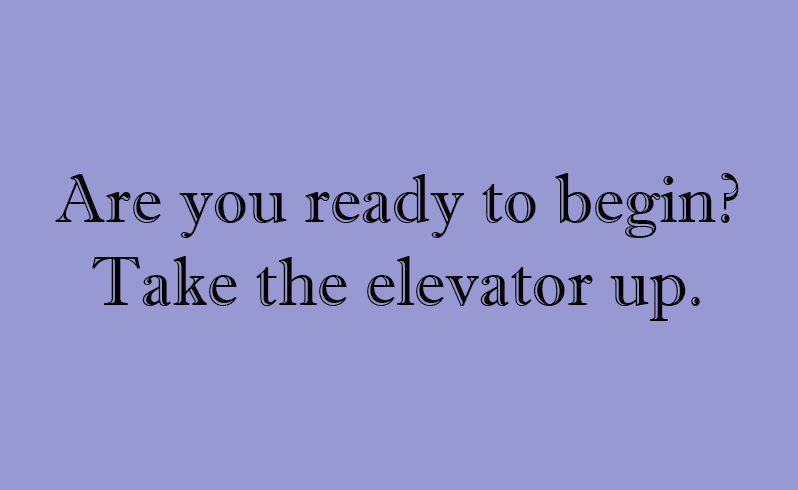
<style>
.page{position:relative;width:798px;height:490px;background:#9898d3}
.page>*{position:absolute;margin:0}
.t1{font:68.7px "ImprintMT-Shadow";color:#030303}
</style>
<div class="page">
<p class="t1" style="left:55px;top:173px;width:684px;height:148px;text-align:center">Are you ready to begin?<br>Take the elevator up.</p>
</div>
